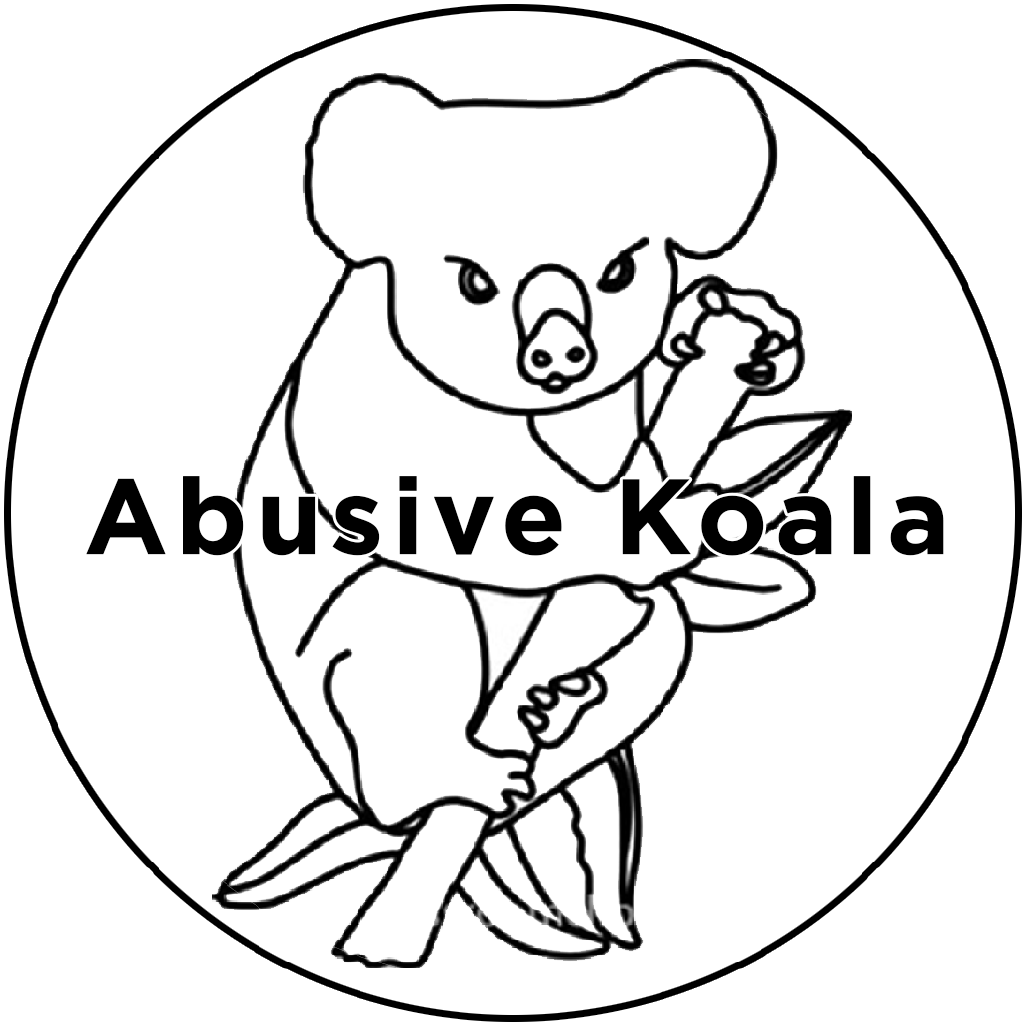
<style>
.page{position:relative;width:1024px;height:1024px;background:#ffffff}
.page>*{position:absolute;margin:0}
.t1{font:106.5px "Gotham-Bold";letter-spacing:0.05em;color:#000000;font-weight:bold}
</style>
<div class="page">
<p class="t1" style="left:86px;top:476px;width:858px;height:80px">Abusive Koala</p>
</div>
